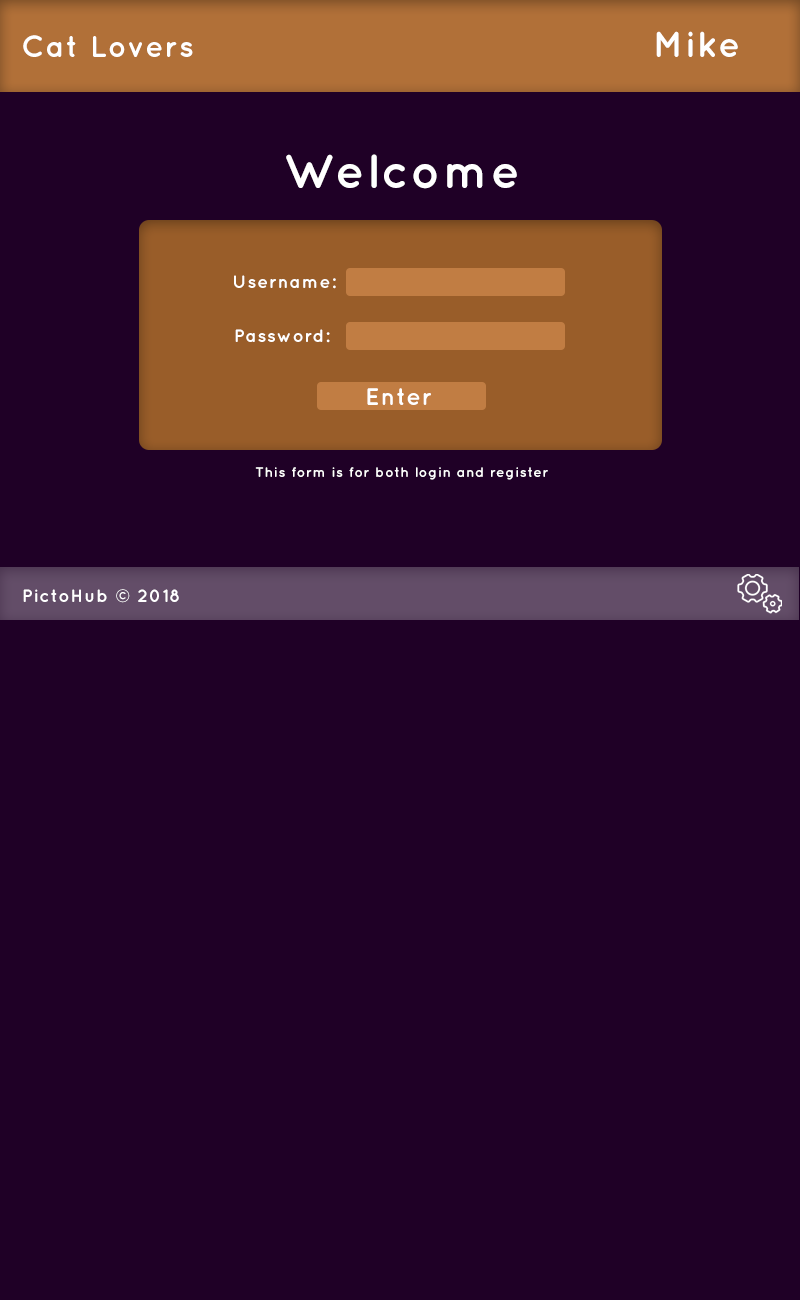
<style>
.page{position:relative;width:800px;height:1300px;background:#1f0026}
.page>*{position:absolute;margin:0}
.t1{font:30px "Quicksand-Bold";letter-spacing:0.05em;color:#ffffff}
.t2{font:36px "Quicksand-Bold";letter-spacing:0.05em;color:#ffffff}
.t3{font:48px "Quicksand-Bold";letter-spacing:0.05em;color:#ffffff}
.t4{font:18px "Quicksand-Bold";letter-spacing:0.05em;color:#ffffff}
.t5{font:24px "Quicksand-Bold";letter-spacing:0.05em;color:#ffffff}
.t6{font:14px "Quicksand-Bold";letter-spacing:0.05em;color:#ffffff}
</style>
<div class="page">
<p class="t1" style="left:23px;top:35px;width:170px;height:22px">Cat Lovers</p>
<p class="t2" style="left:656px;top:31px;width:82px;height:26px">Mike</p>
<p class="t3" style="left:286px;top:154px;width:231px;height:35px">Welcome</p>
<p class="t4" style="left:234px;top:275px;width:102px;height:14px">Username:</p>
<p class="t4" style="left:235px;top:329px;width:95px;height:14px">Password:</p>
<p class="t5" style="left:367px;top:388px;width:64px;height:17px">Enter</p>
<p class="t6" style="left:255px;top:467px;width:293px;height:13px">This form is for both login and register</p>
<p class="t4" style="left:23px;top:589px;width:156px;height:14px">PictoHub © 2018</p>
</div>
